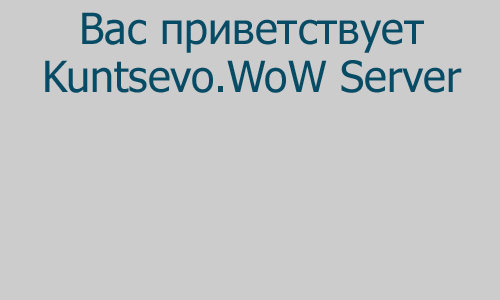
<style>
.page{position:relative;width:500px;height:300px;background:#cccccc}
.page>*{position:absolute;margin:0}
.t1{font:43px/48px "Tahoma";color:#084b65}
</style>
<div class="page">
<p class="t1" style="left:45px;top:12px;width:417px;height:81px;text-align:center">Вас приветствует<br>Kuntsevo.WoW Server</p>
</div>
